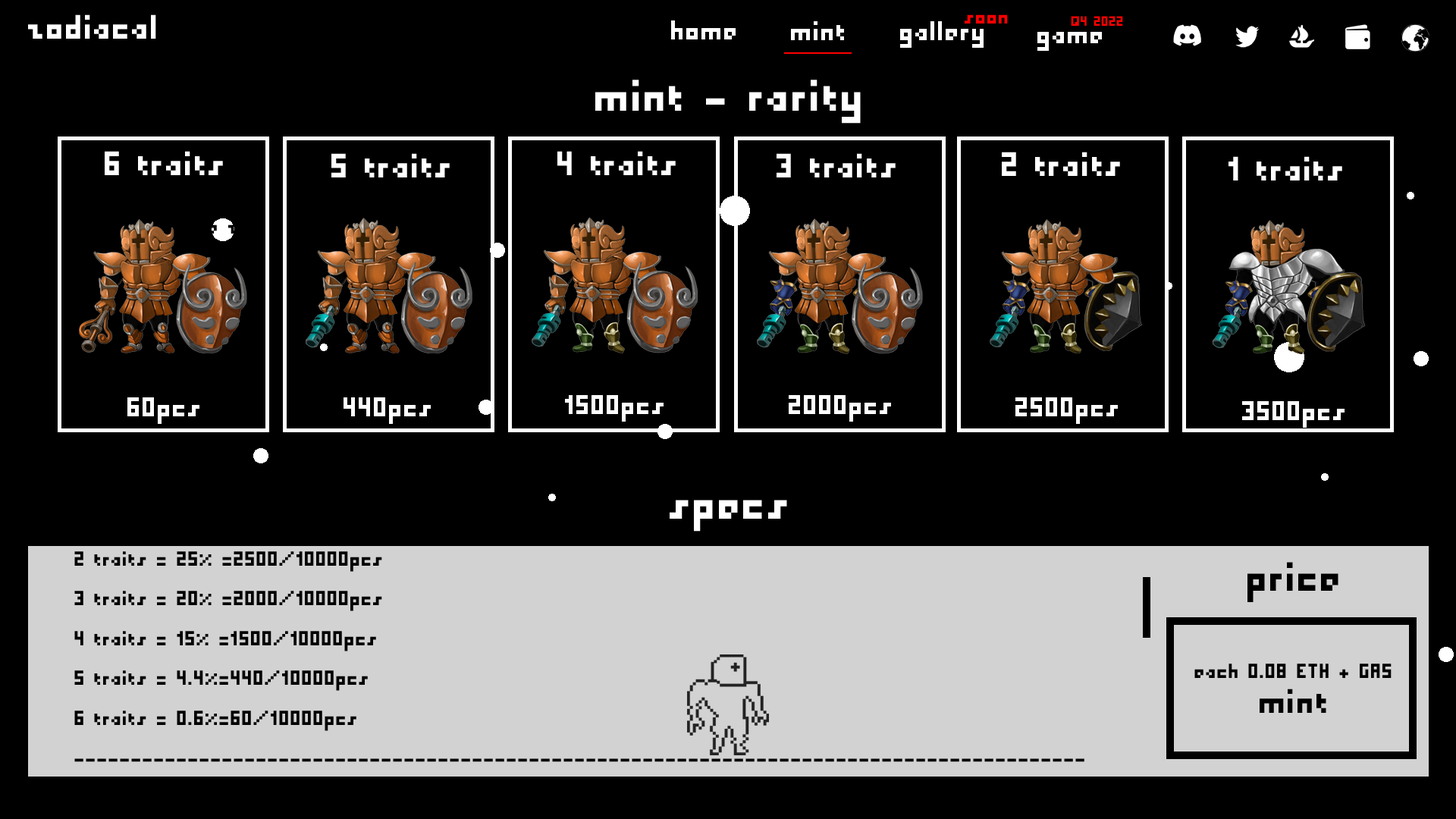
<style>
.page{position:relative;width:1456px;height:819px;background:#000000}
.page>*{position:absolute;margin:0}
.t1{font:37.9px "PixelMillennium";color:#ffffff}
.t2{font:22.7px "PixelMillennium";color:#ff0000}
.t3{font:15.2px "PixelMillennium";color:#ff0000}
.t4{font:30.3px "PixelMillennium";color:#ffffff}
.t5{font:49.3px "PixelMillennium";color:#ffffff}
.t6{font:45.5px "PixelMillennium";color:#000000}
.t7{font:22.7px "PixelMillennium";color:#000000}
.t8{font:37.9px "PixelMillennium";color:#000000}
</style>
<div class="page">
<p class="t1" style="left:28px;top:14px;width:128px;height:25px">zodiacal</p>
<p class="t2" style="left:965px;top:14px;width:43px;height:10px">soon</p>
<p class="t3" style="left:1071px;top:16px;width:52px;height:10px">Q4 2022</p>
<p class="t4" style="left:671px;top:20px;width:65px;height:19px">home</p>
<p class="t4" style="left:791px;top:21px;width:53px;height:19px">mint</p>
<p class="t4" style="left:900px;top:21px;width:84px;height:27px">gallery</p>
<p class="t4" style="left:1037px;top:32px;width:65px;height:19px">game</p>
<p class="t5" style="left:595px;top:80px;width:266px;height:44px">mint - rarity</p>
<p class="t1" style="left:105px;top:151px;width:118px;height:24px">6 traits</p>
<p class="t1" style="left:331px;top:153px;width:119px;height:24px">5 traits</p>
<p class="t1" style="left:557px;top:151px;width:119px;height:24px">4 traits</p>
<p class="t1" style="left:777px;top:153px;width:119px;height:24px">3 traits</p>
<p class="t1" style="left:1002px;top:152px;width:118px;height:24px">2 traits</p>
<p class="t1" style="left:1228px;top:156px;width:114px;height:24px">1 traits</p>
<p class="t4" style="left:127px;top:397px;width:72px;height:27px">60pcs</p>
<p class="t4" style="left:344px;top:397px;width:87px;height:27px">440pcs</p>
<p class="t4" style="left:565px;top:395px;width:99px;height:27px">1500pcs</p>
<p class="t4" style="left:789px;top:395px;width:102px;height:27px">2000pcs</p>
<p class="t4" style="left:1015px;top:397px;width:103px;height:27px">2500pcs</p>
<p class="t4" style="left:1242px;top:401px;width:103px;height:27px">3500pcs</p>
<p class="t5" style="left:670px;top:500px;width:117px;height:32px">specs</p>
<p class="t6" style="left:1247px;top:562px;width:91px;height:40px">price</p>
<p class="t7" style="left:1194px;top:664px;width:198px;height:14px">each 0.08 ETH + GAS</p>
<p class="t8" style="left:1260px;top:689px;width:66px;height:24px">mint</p>
</div>
